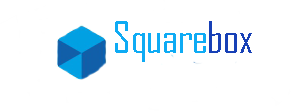
<style>
.page{position:relative;width:291px;height:112px;background:#ffffff}
.page>*{position:absolute;margin:0}
.t1{font:41.7px "AgencyFB-Reg";color:#0eabf4}
.t2{font:41.7px "AgencyFB-Reg";color:#1740b6}
</style>
<div class="page">
<p class="t1" style="left:115px;top:21px;width:137px;height:41px">Square<span class="t2">box</span></p>
</div>
